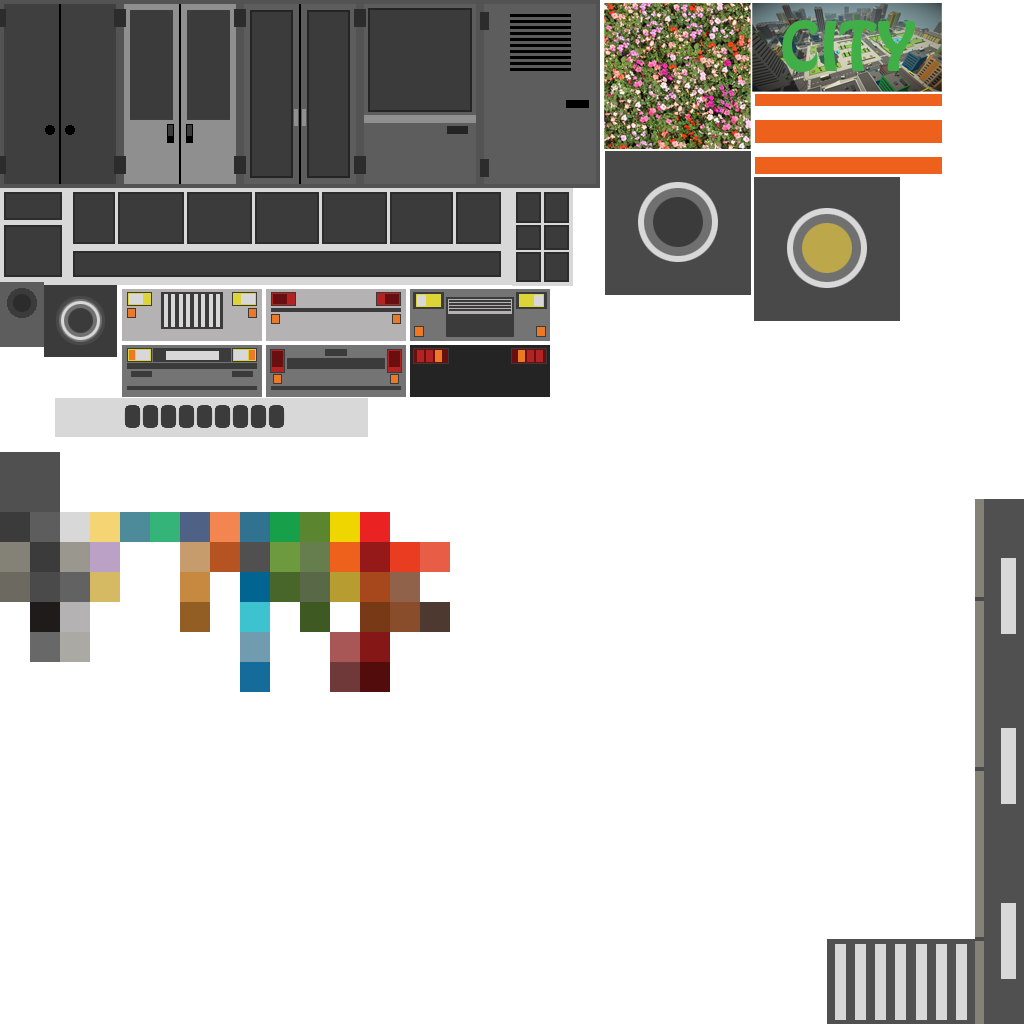
<style>
.page{position:relative;width:1024px;height:1024px;background:#ffffff}
.page>*{position:absolute;margin:0}
.t1{font:60px "HoboStd";color:#41af48}
</style>
<div class="page">
<p class="t1" style="left:782px;top:20px;width:133px;height:52px">CITY</p>
</div>
